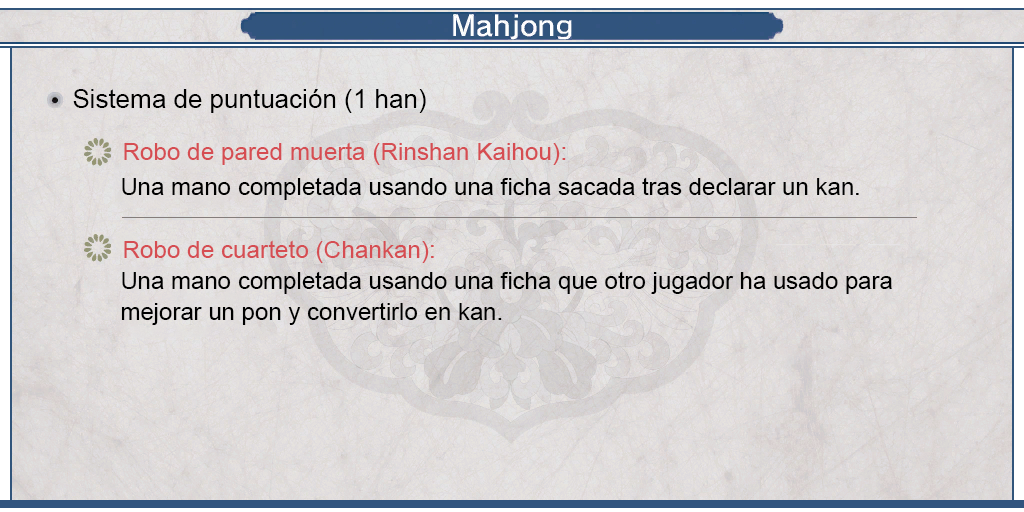
<style>
.page{position:relative;width:1024px;height:512px}
.page>*{position:absolute;margin:0}
.t1{font:26px "ArialMT";color:#000000}
.t2{font:24px "ArialMT";color:#d64d52}
.t3{font:24px "ArialMT";color:#000000}
.t4{font:24px/31px "ArialMT";color:#000000}
</style>
<div class="page">
<p class="t1" style="left:73px;top:89px;width:353px;height:24px">Sistema de puntuación (1 han)</p>
<p class="t2" style="left:124px;top:142px;width:442px;height:23px">Robo de pared muerta (Rinshan Kaihou):</p>
<p class="t3" style="left:122px;top:177px;width:737px;height:23px">Una mano completada usando una ficha sacada tras declarar un kan.</p>
<p class="t2" style="left:124px;top:240px;width:310px;height:23px">Robo de cuarteto (Chankan):</p>
<p class="t4" style="left:121px;top:271px;width:771px;height:54px;text-align:justify">Una mano completada usando una ficha que otro jugador ha usado para <br>mejorar un pon y convertirlo en kan.</p>
</div>
